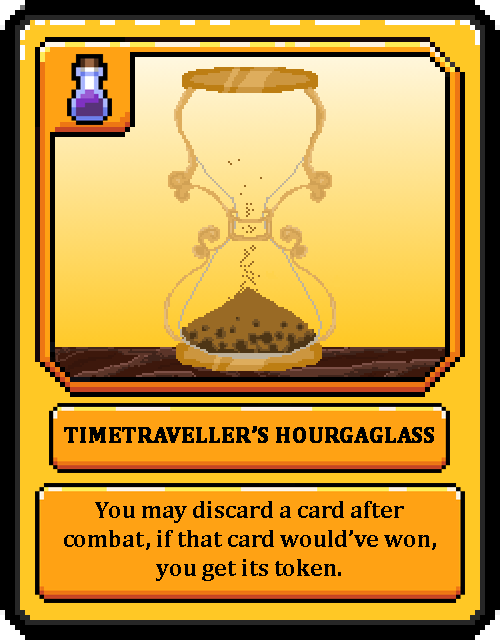
<style>
.page{position:relative;width:500px;height:640px;background:#000000}
.page>*{position:absolute;margin:0}
.t1{font:22px "Cambria-Bold";color:#000000;text-transform:uppercase;font-weight:bold}
.t2{font:24px "Cambria-Bold";color:#000000}
</style>
<div class="page">
<p class="t1" style="left:64px;top:426px;width:370px;height:17px">Timetraveller’s Hourgaglass</p>
<p class="t2" style="left:64px;top:501px;width:372px;height:80px;text-align:center">You may discard a card after combat, if that card would’ve won, you get its token.</p>
</div>
